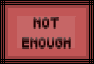
<style>
.page{position:relative;width:94px;height:64px;background:#c15656}
.page>*{position:absolute;margin:0}
.t1{font:8.3px "Pixeled";color:#270000}
.t2{font:8.3px "Pixeled";color:#ff9e9e}
.t3{font:25px "Pixeled";color:#c66666}
.t4{font:4.2px "Pixeled";color:#c66666}
.t5{font:125px "Pixeled";color:#c66666}
</style>
<div class="page">
<p class="t1" style="left:22px;top:16px;width:49px;height:32px;text-align:center"><span class="t2"><br></span>NOT<br><br>ENOUGH<br><br><span class="t3">enough</span><span class="t4">No</span><span class="t5">Not</span></p>
</div>
